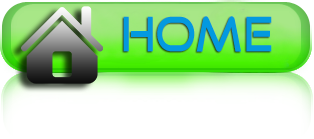
<style>
.page{position:relative;width:314px;height:139px;background:#ffffff}
.page>*{position:absolute;margin:0}
.t1{font:48px "GoodTimes";color:#0399df;scale:0.83 1}
</style>
<div class="page">
<p class="t1" style="left:123px;top:16px;width:149px;height:36px">Home</p>
</div>
